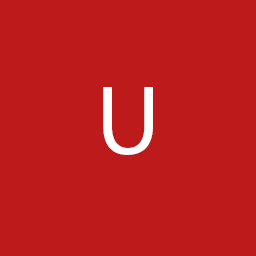
<style>
.page{position:relative;width:256px;height:256px;background:#bd1b1b}
.page>*{position:absolute;margin:0}
.t1{font:100px "MyriadPro-Regular";color:#ffffff}
</style>
<div class="page">
<p class="t1" style="left:103px;top:87px;width:50px;height:68px">U</p>
</div>
